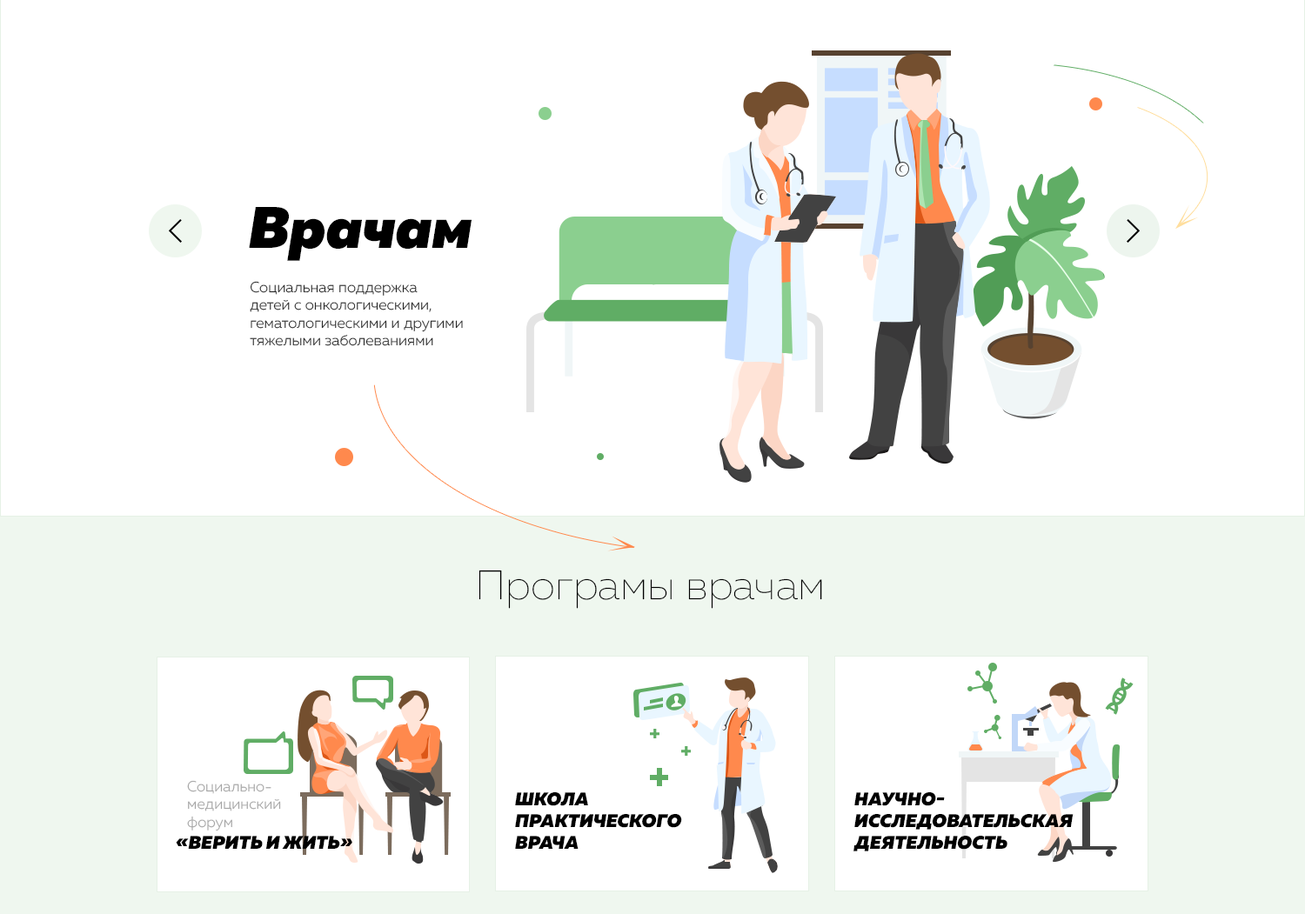
<style>
.page{position:relative;width:1305px;height:914px;background:#ffffff}
.page>*{position:absolute;margin:0}
.t1{font:58.3px "MullerBlackItalic";color:#000000}
.t2{font:14.8px "MullerLight";color:#282828}
.t3{font:40.9px "MullerThin";color:#000000}
.t4{font:14.8px "MullerLight";color:#a6a6a6}
.t5{font:18.3px "MullerBlackItalic";color:#000000;text-transform:uppercase}
</style>
<div class="page">
<p class="t1" style="left:249px;top:207px;width:222px;height:54px">Врачам</p>
<p class="t2" style="left:250px;top:281px;width:213px;height:65px">Социальная поддержка <br>детей с онкологическими, <br>гематологическими и другими <br>тяжелыми заболеваниями</p>
<p class="t3" style="left:478px;top:570px;width:344px;height:39px">Програмы врачам</p>
<p class="t4" style="left:176px;top:780px;width:176px;height:69px">Социально-<br>   медицинский<br>   форум <br><span class="t5">«Верить и жить»</span></p>
<p class="t5" style="left:515px;top:792px;width:167px;height:57px">Школа<br>практического<br>врача</p>
<p class="t5" style="left:853px;top:792px;width:220px;height:59px">Научно-<br>исследовательская<br>деятельность</p>
</div>
